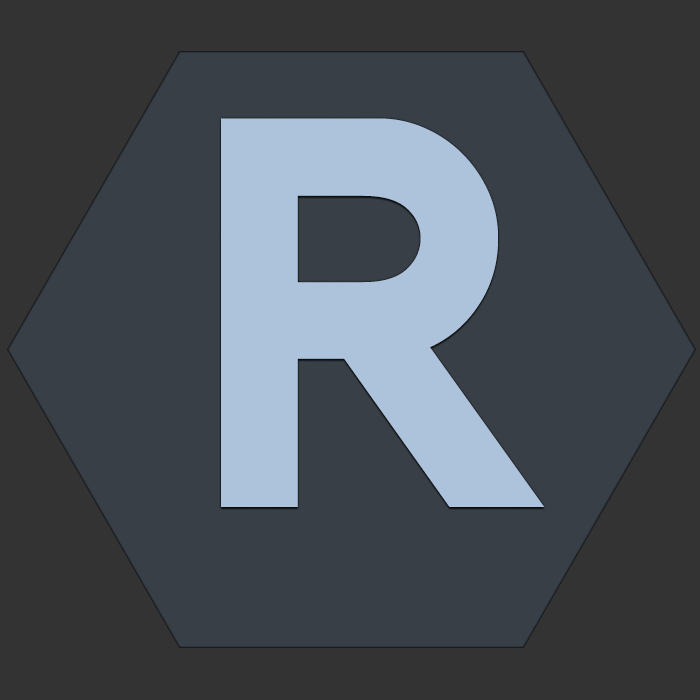
<style>
.page{position:relative;width:700px;height:700px;background:#383f47}
.page>*{position:absolute;margin:0}
.t1{font:555px "Porter-BoldDEMO";color:#adc3db}
</style>
<div class="page">
<p class="t1" style="left:221px;top:118px;width:324px;height:389px">R</p>
</div>
